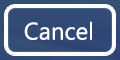
<style>
.page{position:relative;width:120px;height:60px}
.page>*{position:absolute;margin:0}
.t1{font:24px "SegoeUI";color:#ffffff}
</style>
<div class="page">
<p class="t1" style="left:24px;top:21px;width:68px;height:19px">Cancel</p>
</div>
